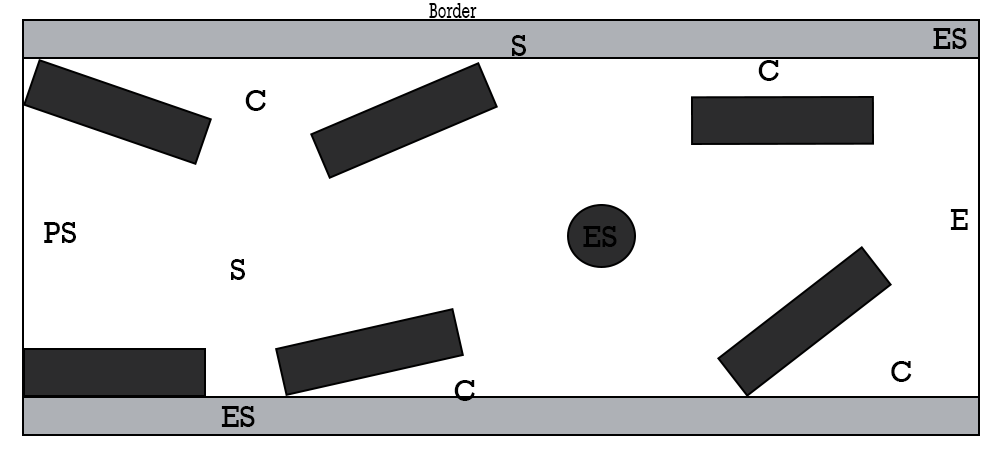
<style>
.page{position:relative;width:1000px;height:450px;background:#ffffff}
.page>*{position:absolute;margin:0}
.t1{font:21.6px "Rockwell";color:#000000;scale:0.7 1}
.t2{font:30px "Rockwell";color:#000000}
</style>
<div class="page">
<p class="t1" style="left:429px;top:3px;width:48px;height:15px">Border</p>
<p class="t2" style="left:933px;top:28px;width:34px;height:21px">ES</p>
<p class="t2" style="left:512px;top:35px;width:14px;height:21px">S</p>
<p class="t2" style="left:758px;top:60px;width:21px;height:21px">C</p>
<p class="t2" style="left:245px;top:90px;width:21px;height:21px">C</p>
<p class="t2" style="left:950px;top:209px;width:18px;height:21px">E</p>
<p class="t2" style="left:44px;top:222px;width:32px;height:21px">PS</p>
<p class="t2" style="left:583px;top:226px;width:34px;height:21px">ES</p>
<p class="t2" style="left:231px;top:259px;width:14px;height:21px">S</p>
<p class="t2" style="left:891px;top:361px;width:21px;height:21px">C</p>
<p class="t2" style="left:454px;top:380px;width:21px;height:21px">C</p>
<p class="t2" style="left:221px;top:406px;width:34px;height:21px">ES</p>
</div>
